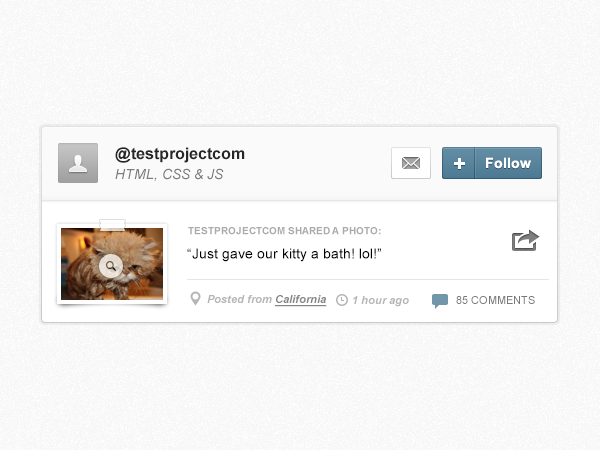
<style>
.page{position:relative;width:600px;height:450px;background:#f7f7f7}
.page>*{position:absolute;margin:0}
.t1{font:16px "Arial-BoldMT";color:#262626}
.t2{font:14px "Arial-BoldMT";color:#ffffff}
.t3{font:14px "Arial-ItalicMT";color:#7b7b7b}
.t4{font:10px "Arial-BoldMT";color:#ababab;text-transform:uppercase}
.t5{font:14px "ArialMT";color:#000000}
.t6{font:11px "Arial-BoldItalicMT";color:#b5b5b5}
.t7{font:11px "Arial-BoldItalicMT";color:#848484;text-decoration:underline}
.t8{font:11px "ArialMT";color:#797979;text-transform:uppercase}
</style>
<div class="page">
<p class="t1" style="left:115px;top:147px;width:130px;height:16px">@testprojectcom</p>
<p class="t2" style="left:486px;top:157px;width:45px;height:12px">Follow</p>
<p class="t3" style="left:115px;top:168px;width:109px;height:13px">HTML, CSS &amp; JS</p>
<p class="t4" style="left:188px;top:227px;width:193px;height:8px">testprojectcom shared a photo:</p>
<p class="t5" style="left:187px;top:248px;width:194px;height:14px">“Just gave our kitty a bath! lol!”</p>
<p class="t6" style="left:207px;top:295px;width:120px;height:12px">Posted from <span class="t7">California</span></p>
<p class="t6" style="left:353px;top:296px;width:56px;height:11px">1 hour ago</p>
<p class="t8" style="left:456px;top:296px;width:79px;height:8px">85 Comments</p>
</div>
